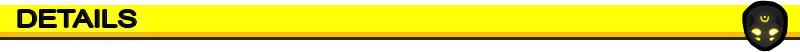
<style>
.page{position:relative;width:800px;height:52px;background:#ffff08}
.page>*{position:absolute;margin:0}
.t1{font:23.1px "ArialMT";letter-spacing:-0.008em;color:#000000;scale:1.3 1}
</style>
<div class="page">
<p class="t1" style="left:18px;top:10px;width:118px;height:17px">DETAILS</p>
</div>
